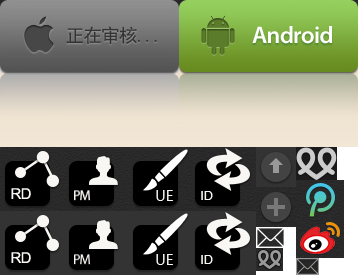
<style>
.page{position:relative;width:358px;height:275px}
.page>*{position:absolute;margin:0}
.t1{font:18.7px "SimHei";letter-spacing:-0.05em;color:#333333}
.t2{font:15px "ArialMT";letter-spacing:-0.05em;color:#f9f7f3}
.t3{font:14px "MicrosoftYaHei";color:#f9f7f3;text-transform:uppercase}
.t4{font:13px "HelveticaCE-Regular";color:#f9f7f3;text-transform:uppercase}
</style>
<div class="page">
<p class="t1" style="left:66px;top:26px;width:91px;height:19px">正在审核...</p>
<p class="t2" style="left:11px;top:188px;width:20px;height:11px">RD</p>
<p class="t3" style="left:156px;top:190px;width:17px;height:11px">ue</p>
<p class="t4" style="left:201px;top:191px;width:12px;height:9px">id</p>
<p class="t2" style="left:11px;top:252px;width:20px;height:11px">RD</p>
<p class="t3" style="left:156px;top:254px;width:17px;height:11px">ue</p>
<p class="t4" style="left:201px;top:255px;width:12px;height:9px">id</p>
</div>
